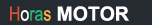
<style>
.page{position:relative;width:152px;height:25px;background:#262a31}
.page>*{position:absolute;margin:0}
.t1{font:19.5px "Arial-BoldMT";letter-spacing:-0.005em;color:#ffffff}
.t2{font:19.5px "ArialNarrow";letter-spacing:-0.005em;color:#da542e}
.t3{font:19.5px "ArialNarrow";letter-spacing:-0.005em;color:#ffffff}
.t4{font:19.5px "ArialNarrow";letter-spacing:-0.005em;color:#28b779}
.t5{font:19.5px "ArialNarrow";letter-spacing:-0.005em;color:#ffb848}
</style>
<div class="page">
<p class="t1" style="left:10px;top:6px;width:119px;height:15px"><span class="t2">H</span><span class="t3">o</span><span class="t4">ra</span><span class="t5">s </span>MOTOR</p>
</div>
